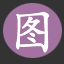
<style>
.page{position:relative;width:64px;height:64px;background:#a372a1}
.page>*{position:absolute;margin:0}
.t1{font:48px "STKaiti";color:#ffffff}
</style>
<div class="page">
<p class="t1" style="left:15px;top:11px;width:35px;height:42px">图</p>
</div>
